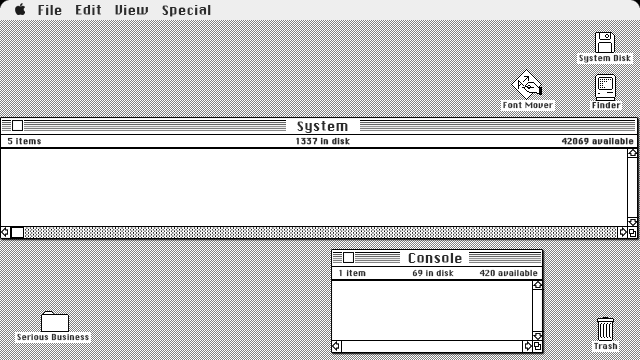
<style>
.page{position:relative;width:640px;height:360px;background:#ffffff}
.page>*{position:absolute;margin:0}
.t1{font:13px "ChicagoFLF";color:#2c2c2c}
.t2{font:8px "ChicagoFLF";color:#2c2c2c}
.t3{font:8px "ChicagoFLF";color:#2c2c2c;font-weight:bold}
</style>
<div class="page">
<p class="t1" style="left:38px;top:5px;width:173px;height:12px">File   Edit   View   Special</p>
<p class="t2" style="left:579px;top:54px;width:52px;height:9px">System Disk</p>
<p class="t2" style="left:503px;top:101px;width:50px;height:8px">Font Mover</p>
<p class="t3" style="left:592px;top:101px;width:29px;height:8px">Finder</p>
<p class="t1" style="left:297px;top:121px;width:51px;height:12px">System</p>
<p class="t3" style="left:7px;top:137px;width:34px;height:8px">5 items</p>
<p class="t3" style="left:296px;top:137px;width:54px;height:8px">1337 in disk</p>
<p class="t3" style="left:561px;top:137px;width:73px;height:8px">42069 available</p>
<p class="t1" style="left:408px;top:253px;width:54px;height:10px">Console</p>
<p class="t2" style="left:339px;top:269px;width:27px;height:8px">1 item</p>
<p class="t2" style="left:412px;top:269px;width:42px;height:8px">69 in disk</p>
<p class="t2" style="left:479px;top:269px;width:59px;height:8px">420 available</p>
<p class="t2" style="left:17px;top:333px;width:72px;height:8px">Serious Business</p>
<p class="t2" style="left:594px;top:342px;width:24px;height:8px">Trash</p>
</div>
